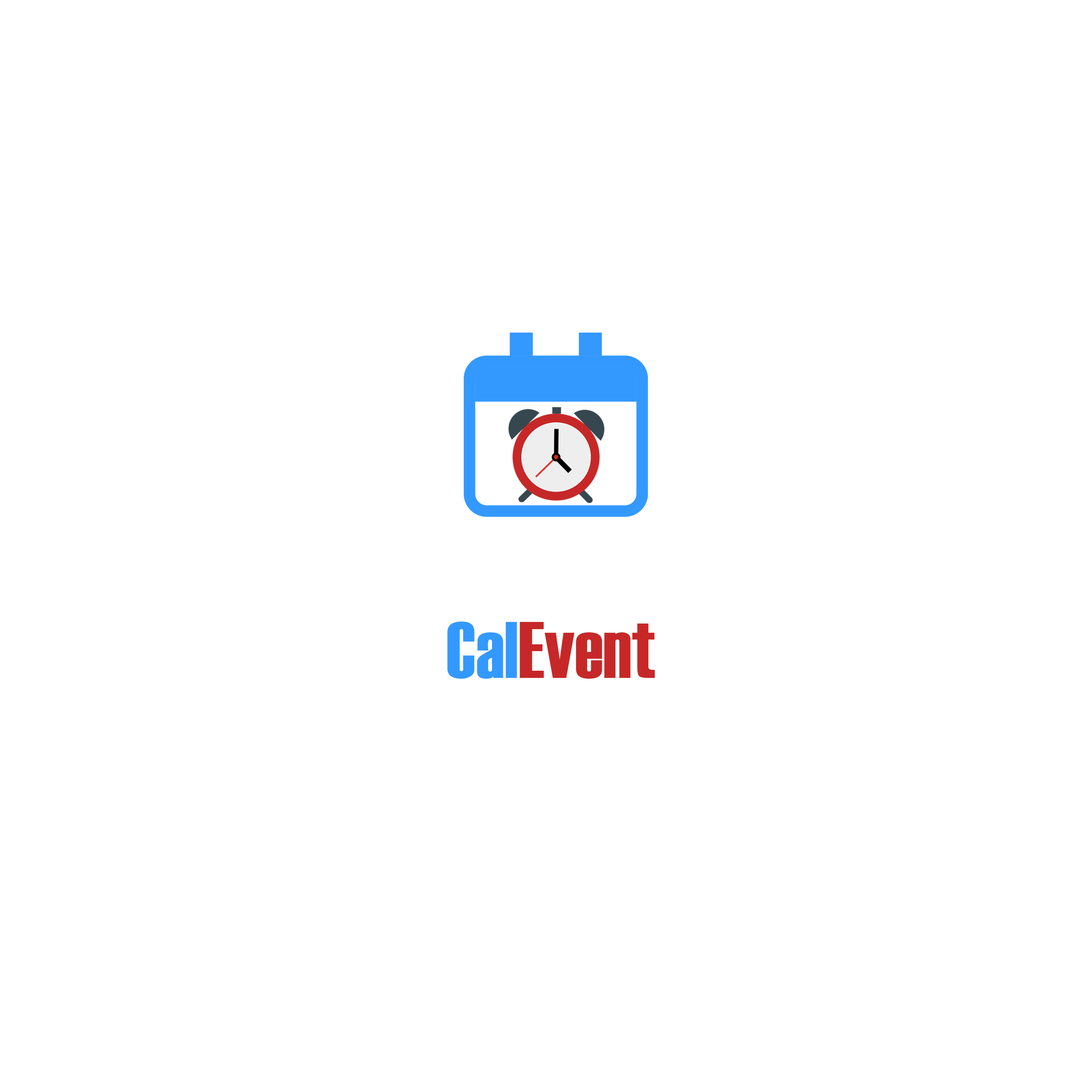
<style>
.page{position:relative;width:1092px;height:1092px;background:#ffffff}
.page>*{position:absolute;margin:0}
.t1{font:79.9px "Haettenschweiler";color:#c62828}
.t2{font:79.9px "Haettenschweiler";color:#3399ff}
</style>
<div class="page">
<p class="t1" style="left:447px;top:621px;width:208px;height:58px"><span class="t2">Cal</span>Event</p>
</div>
